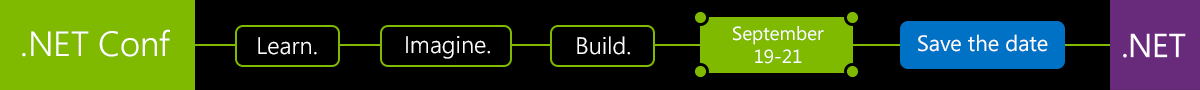
<style>
.page{position:relative;width:1200px;height:90px;background:#000000}
.page>*{position:absolute;margin:0}
.t1{font:35px "SegoeUI-Semilight";color:#ffffff}
.t2{font:19px/23px "SegoeUI";color:#ffffff}
.t3{font:23.7px "SegoeUI-Semilight";color:#ffffff}
.t4{font:22px "SegoeUI";color:#ffffff}
</style>
<div class="page">
<p class="t1" style="left:22px;top:29px;width:148px;height:28px">.NET Conf</p>
<p class="t2" style="left:733px;top:26px;width:91px;height:38px;text-align:center">September<br>19-21</p>
<p class="t3" style="left:258px;top:37px;width:59px;height:18px">Learn.</p>
<p class="t3" style="left:406px;top:36px;width:84px;height:23px">Imagine.</p>
<p class="t3" style="left:577px;top:36px;width:53px;height:19px">Build.</p>
<p class="t4" style="left:918px;top:34px;width:130px;height:18px">Save the date</p>
</div>
